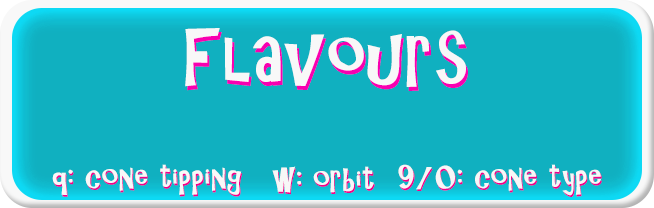
<style>
.page{position:relative;width:654px;height:208px;background:#10b0c0}
.page>*{position:absolute;margin:0}
.t1{font:72px "ARCHRISTY";letter-spacing:0.025em;color:#ffffff}
.t2{font:72px "ARCHRISTY";letter-spacing:0.025em}
.t3{font:30.9px "ARCHRISTY";letter-spacing:0.025em;color:#ffffff}
.t4{font:30.9px "ARCHRISTY";letter-spacing:0.025em}
.t5{font:30.9px "ARCHRISTY";letter-spacing:0.025em;color:#fefefe}
</style>
<div class="page">
<p class="t1" style="left:185px;top:28px;width:281px;height:59px">Flavours</p>
<p class="t2" style="left:187px;top:32px;width:281px;height:59px">Flavours</p>
<p class="t3" style="left:52px;top:164px;width:190px;height:31px">q: cone tipping</p>
<p class="t4" style="left:53px;top:166px;width:190px;height:31px">q: cone tipping</p>
<p class="t5" style="left:272px;top:166px;width:102px;height:27px">w: orbit</p>
<p class="t4" style="left:273px;top:168px;width:102px;height:27px">w: orbit</p>
<p class="t5" style="left:398px;top:164px;width:203px;height:32px">9/0: cone type</p>
<p class="t4" style="left:399px;top:166px;width:203px;height:31px">9/0: cone type</p>
</div>
